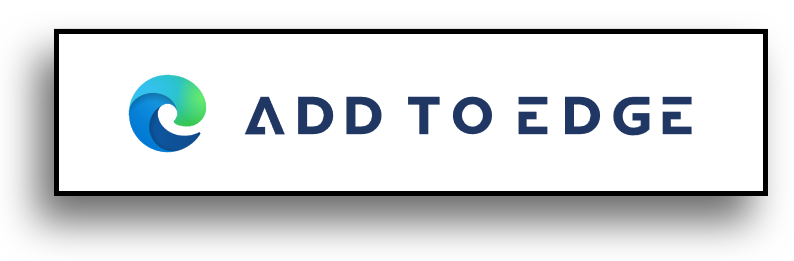
<style>
.page{position:relative;width:794px;height:261px;background:#ffffff}
.page>*{position:absolute;margin:0}
.t1{font:53px "BabaPro-Bold";color:#213763}
</style>
<div class="page">
<p class="t1" style="left:244px;top:96px;width:448px;height:40px">Add to Edge</p>
</div>
